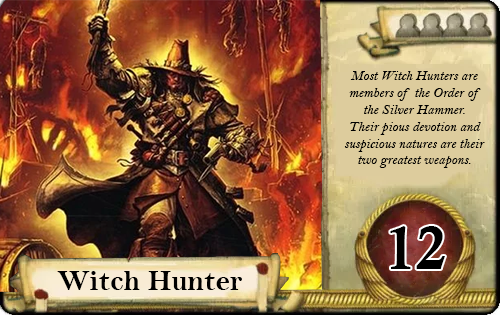
<style>
.page{position:relative;width:500px;height:315px}
.page>*{position:absolute;margin:0}
.t1{font:14px "BellMTItalic";color:#000000}
.t2{font:60px "CalisMTBol";color:#000000}
.t3{font:30px "BellMTBold";color:#000000}
</style>
<div class="page">
<p class="t1" style="left:344px;top:71px;width:141px;height:97px;text-align:center">Most Witch Hunters are members of the Order of the Silver Hammer. <br>Their pious devotion and suspicious natures are their two greatest weapons.</p>
<p class="t2" style="left:390px;top:226px;width:55px;height:43px">12</p>
<p class="t3" style="left:57px;top:271px;width:185px;height:19px">Witch Hunter</p>
</div>
